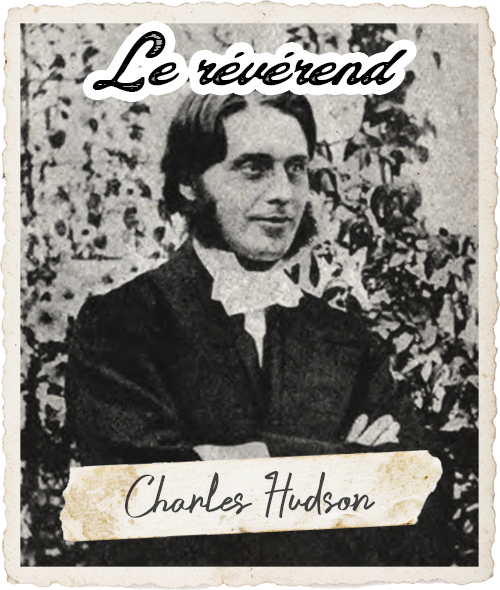
<style>
.page{position:relative;width:500px;height:590px}
.page>*{position:absolute;margin:0}
.t1{font:54.2px "ColinasPersonalUse-Regular";color:#000000}
.t2{font:54.2px "CrustaceansSignatureDEMO-Reg";color:#434240}
</style>
<div class="page">
<p class="t1" style="left:92px;top:31px;width:315px;height:61px">Le révérend</p>
<p class="t2" style="left:125px;top:471px;width:250px;height:47px;rotate:-1deg">Charles Hudson</p>
</div>
